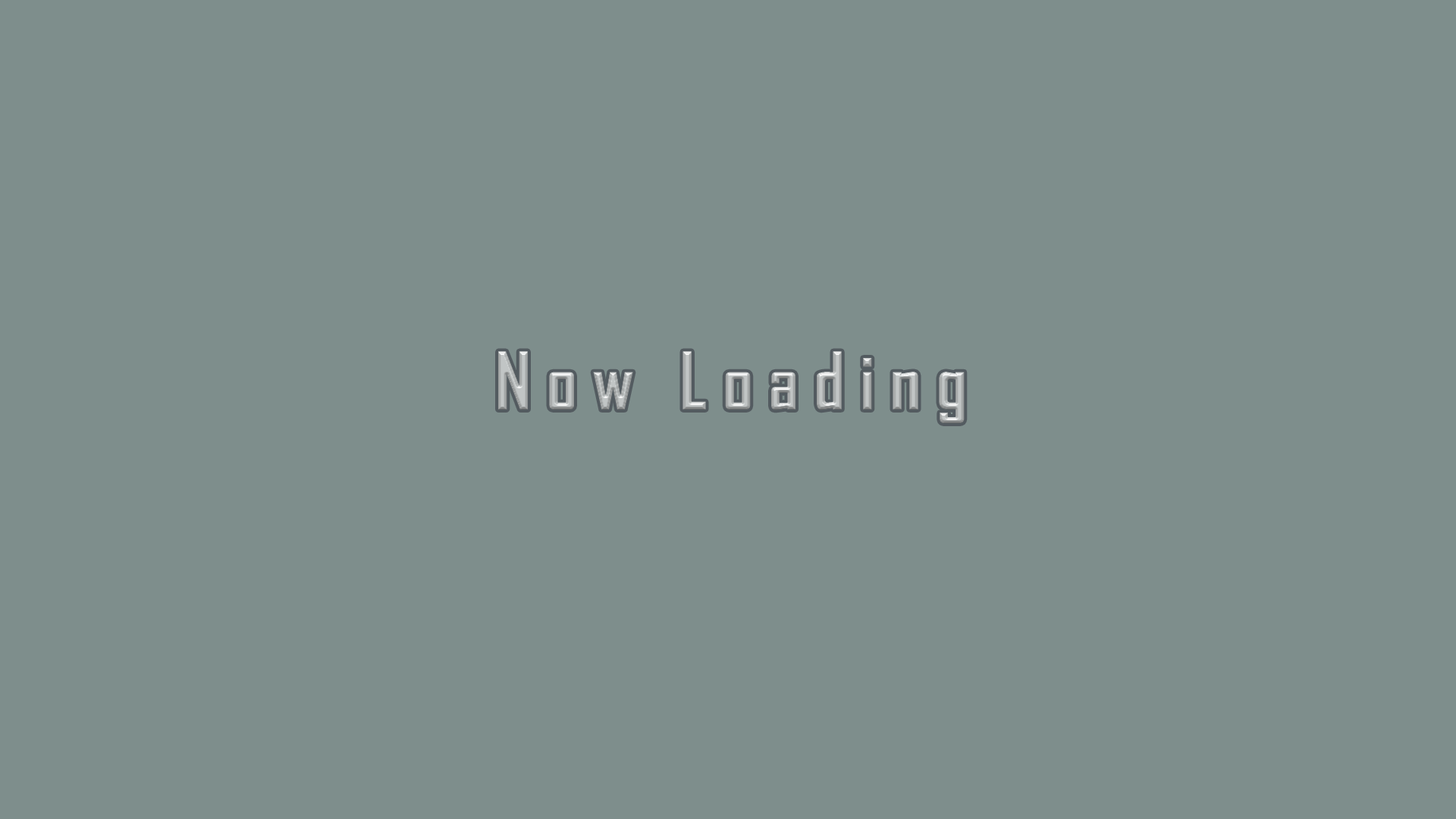
<style>
.page{position:relative;width:1456px;height:819px;background:#7e8e8c}
.page>*{position:absolute;margin:0}
.t1{font:75.8px "AgencyFB-Bold";letter-spacing:0.2em;color:#b3b7b7}
</style>
<div class="page">
<p class="t1" style="left:498px;top:351px;width:467px;height:72px">Now Loading</p>
</div>
